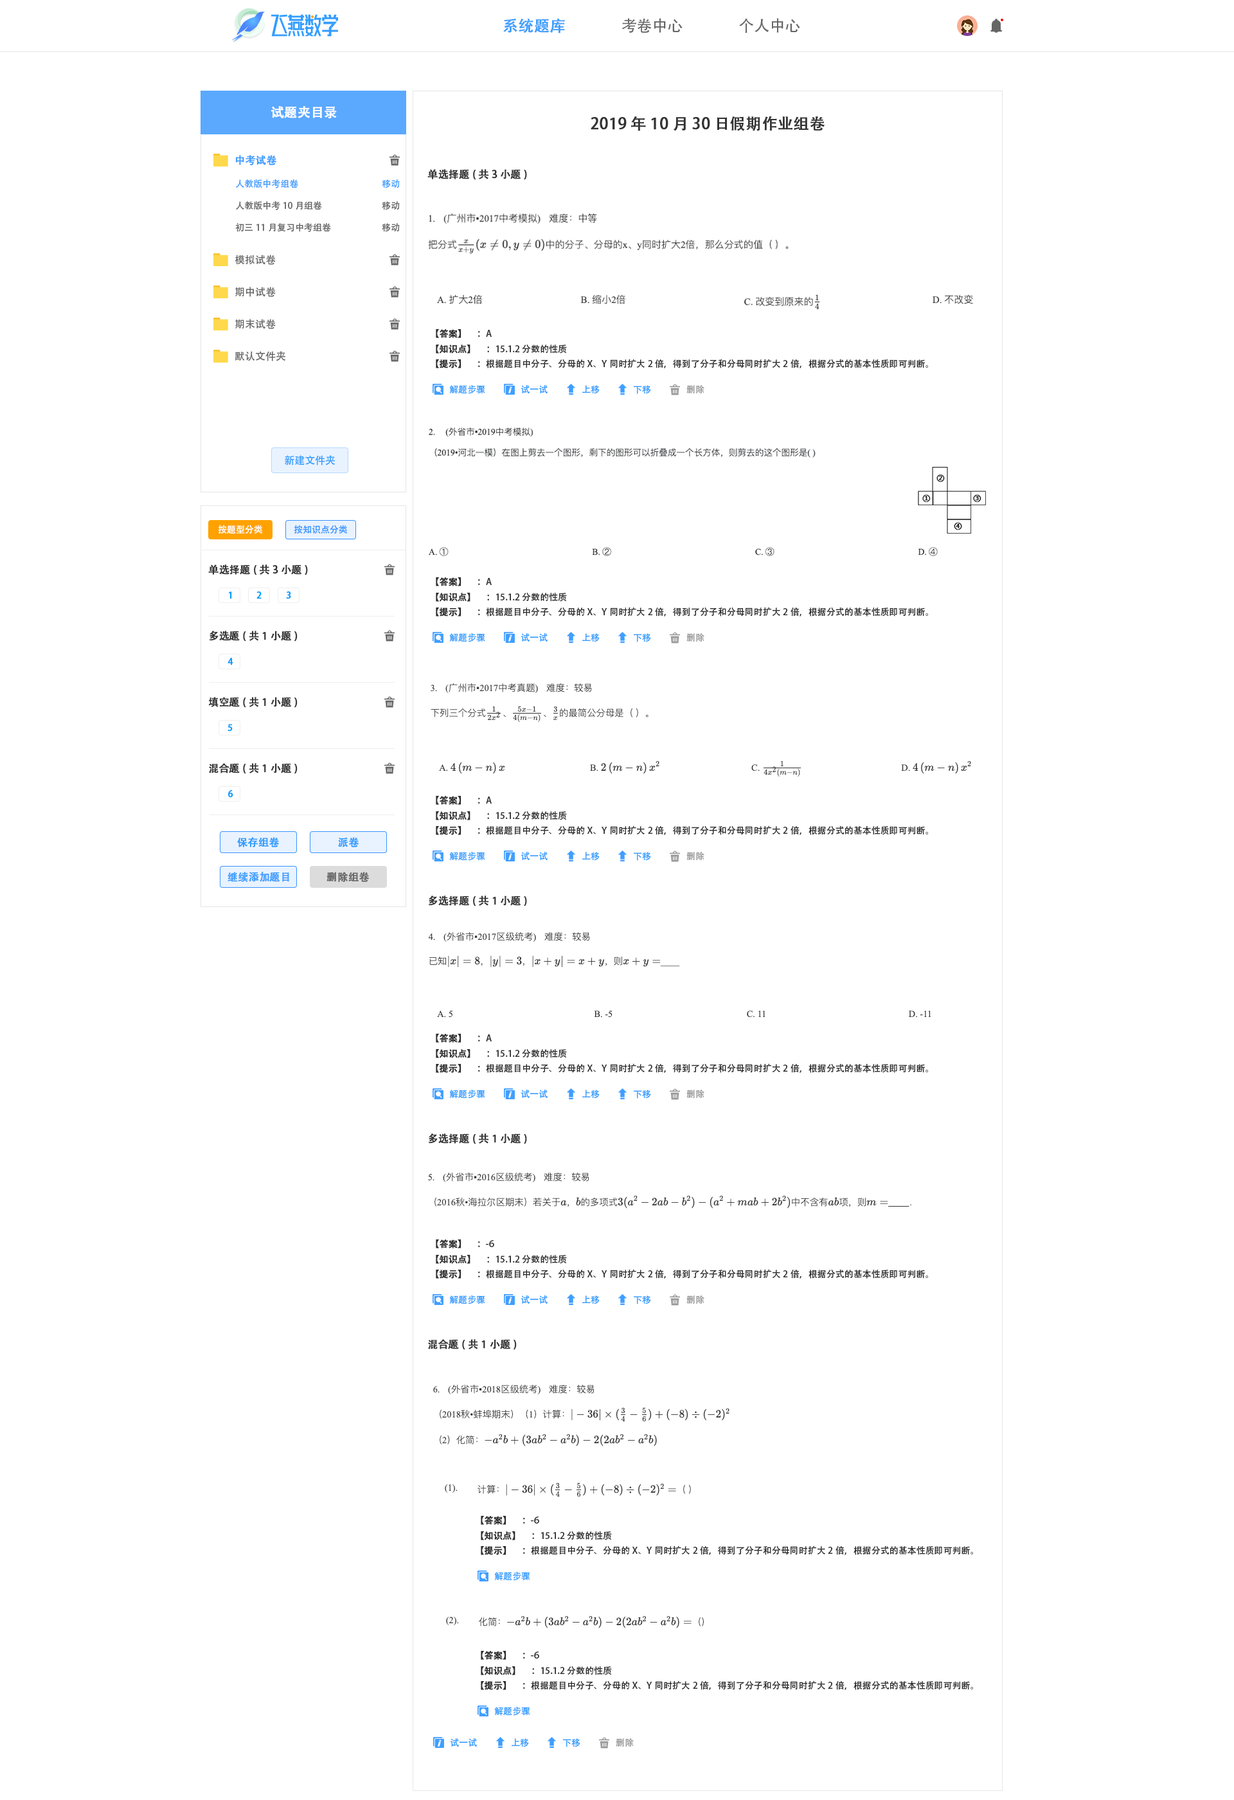
<style>
.page{position:relative;width:1234px;height:1800px;background:#ffffff}
.page>*{position:absolute;margin:0}
.t1{font:15.4px "AdobeHeitiStd-Regular";color:#409eff;font-weight:bold}
.t2{font:15.4px "AdobeHeitiStd-Regular";color:#666666}
.t3{font:12.9px "AdobeHeitiStd-Regular";color:#ffffff;font-weight:bold}
.t4{font:15.4px "AdobeHeitiStd-Regular";color:#333333;font-weight:bold}
.t5{font:10.3px "AdobeHeitiStd-Regular";color:#409eff;font-weight:bold}
.t6{font:10.3px "AdobeHeitiStd-Regular";color:#333333;font-weight:bold}
.t7{font:9px "AdobeHeitiStd-Regular";color:#409eff}
.t8{font:9px "AdobeHeitiStd-Regular";color:#666666}
.t9{font:10.3px "AdobeHeitiStd-Regular";color:#666666}
.t10{font:9px "AdobeHeitiStd-Regular";color:#2e2e2e;font-weight:bold}
.t11{font:9px "AdobeHeitiStd-Regular";color:#2e2e2e}
.t12{font:9px "AdobeHeitiStd-Regular";color:#339dff}
.t13{font:9px "AdobeHeitiStd-Regular";color:#999999}
.t14{font:10.3px "AdobeHeitiStd-Regular";color:#339dff}
.t15{font:9px "AdobeHeitiStd-Regular";color:#ffffff}
.t16{font:9px "AdobeHeitiStd-Regular";color:#3794ff}
.t17{font:9px "AdobeHeitiStd-Regular";color:#049eff;font-weight:bold}
.t18{font:10.3px "AdobeHeitiStd-Regular";color:#339dff;font-weight:bold}
.t19{font:10.3px "AdobeHeitiStd-Regular";color:#666666;font-weight:bold}
</style>
<div class="page">
<p class="t1" style="left:503px;top:19px;width:62px;height:14px">系统题库</p>
<p class="t2" style="left:622px;top:18px;width:61px;height:15px">考卷中心</p>
<p class="t2" style="left:739px;top:18px;width:61px;height:15px">个人中心</p>
<p class="t3" style="left:271px;top:106px;width:66px;height:13px">试题夹目录</p>
<p class="t4" style="left:591px;top:116px;width:234px;height:15px">2019年10月30日假期作业组卷</p>
<p class="t5" style="left:235px;top:155px;width:42px;height:11px">中考试卷</p>
<p class="t6" style="left:428px;top:169px;width:99px;height:11px">单选择题(共3小题)</p>
<p class="t7" style="left:236px;top:179px;width:62px;height:9px">人教版中考组卷</p>
<p class="t7" style="left:382px;top:179px;width:18px;height:9px">移动</p>
<p class="t8" style="left:236px;top:201px;width:86px;height:9px">人教版中考10月组卷</p>
<p class="t8" style="left:382px;top:201px;width:18px;height:9px">移动</p>
<p class="t8" style="left:235px;top:223px;width:96px;height:9px">初三11月复习中考组卷</p>
<p class="t8" style="left:382px;top:223px;width:18px;height:9px">移动</p>
<p class="t9" style="left:235px;top:255px;width:41px;height:10px">模拟试卷</p>
<p class="t9" style="left:235px;top:287px;width:41px;height:10px">期中试卷</p>
<p class="t9" style="left:235px;top:319px;width:41px;height:10px">期末试卷</p>
<p class="t10" style="left:436px;top:329px;width:56px;height:9px">【答案】 <span class="t11">     ：A</span></p>
<p class="t9" style="left:235px;top:351px;width:50px;height:10px">默认文件夹</p>
<p class="t11" style="left:436px;top:345px;width:131px;height:9px"><span class="t10">【知识点】 </span>     ：15.1.2 分数的性质</p>
<p class="t11" style="left:436px;top:359px;width:492px;height:9px"><span class="t10">【提示】 </span>     ：根据题目中分子、分母的X、Y同时扩大2倍，得到了分子和分母同时扩大2倍，根据分式的基本性质即可判断。</p>
<p class="t12" style="left:449px;top:385px;width:36px;height:9px">解题步骤</p>
<p class="t12" style="left:521px;top:385px;width:27px;height:8px">试一试</p>
<p class="t12" style="left:582px;top:385px;width:18px;height:9px">上移</p>
<p class="t12" style="left:634px;top:385px;width:17px;height:9px">下移</p>
<p class="t13" style="left:687px;top:385px;width:18px;height:8px">删除</p>
<p class="t14" style="left:284px;top:455px;width:51px;height:10px">新建文件夹</p>
<p class="t15" style="left:218px;top:525px;width:44px;height:9px">按题型分类</p>
<p class="t16" style="left:294px;top:525px;width:53px;height:9px">按知识点分类</p>
<p class="t6" style="left:208px;top:564px;width:100px;height:11px">单选择题(共3小题)</p>
<p class="t10" style="left:436px;top:577px;width:56px;height:9px">【答案】 <span class="t11">     ：A</span></p>
<p class="t17" style="left:228px;top:591px;width:4px;height:8px">1</p>
<p class="t17" style="left:256px;top:591px;width:6px;height:8px">2</p>
<p class="t17" style="left:286px;top:591px;width:5px;height:8px">3</p>
<p class="t11" style="left:436px;top:593px;width:131px;height:9px"><span class="t10">【知识点】 </span>     ：15.1.2 分数的性质</p>
<p class="t11" style="left:436px;top:607px;width:492px;height:9px"><span class="t10">【提示】 </span>     ：根据题目中分子、分母的X、Y同时扩大2倍，得到了分子和分母同时扩大2倍，根据分式的基本性质即可判断。</p>
<p class="t6" style="left:209px;top:631px;width:89px;height:11px">多选题(共1小题)</p>
<p class="t12" style="left:449px;top:633px;width:36px;height:9px">解题步骤</p>
<p class="t12" style="left:521px;top:633px;width:27px;height:9px">试一试</p>
<p class="t12" style="left:582px;top:633px;width:18px;height:9px">上移</p>
<p class="t12" style="left:634px;top:633px;width:17px;height:9px">下移</p>
<p class="t13" style="left:687px;top:633px;width:18px;height:9px">删除</p>
<p class="t17" style="left:228px;top:658px;width:5px;height:7px">4</p>
<p class="t6" style="left:208px;top:697px;width:90px;height:11px">填空题(共1小题)</p>
<p class="t17" style="left:228px;top:724px;width:5px;height:8px">5</p>
<p class="t6" style="left:209px;top:763px;width:89px;height:11px">混合题(共1小题)</p>
<p class="t17" style="left:228px;top:790px;width:5px;height:8px">6</p>
<p class="t10" style="left:436px;top:796px;width:56px;height:9px">【答案】 <span class="t11">     ：A</span></p>
<p class="t11" style="left:436px;top:811px;width:131px;height:9px"><span class="t10">【知识点】 </span>     ：15.1.2 分数的性质</p>
<p class="t11" style="left:436px;top:825px;width:492px;height:10px"><span class="t10">【提示】 </span>     ：根据题目中分子、分母的X、Y同时扩大2倍，得到了分子和分母同时扩大2倍，根据分式的基本性质即可判断。</p>
<p class="t18" style="left:237px;top:837px;width:43px;height:10px">保存组卷</p>
<p class="t18" style="left:338px;top:837px;width:21px;height:10px">派卷</p>
<p class="t12" style="left:449px;top:852px;width:36px;height:9px">解题步骤</p>
<p class="t12" style="left:521px;top:852px;width:27px;height:8px">试一试</p>
<p class="t12" style="left:582px;top:852px;width:18px;height:9px">上移</p>
<p class="t12" style="left:634px;top:852px;width:17px;height:9px">下移</p>
<p class="t13" style="left:687px;top:852px;width:18px;height:8px">删除</p>
<p class="t5" style="left:228px;top:872px;width:61px;height:10px">继续添加题目</p>
<p class="t19" style="left:327px;top:872px;width:43px;height:10px">删除组卷</p>
<p class="t6" style="left:428px;top:896px;width:99px;height:10px">多选择题(共1小题)</p>
<p class="t10" style="left:436px;top:1034px;width:56px;height:9px">【答案】 <span class="t11">     ：A</span></p>
<p class="t11" style="left:436px;top:1049px;width:131px;height:9px"><span class="t10">【知识点】 </span>     ：15.1.2 分数的性质</p>
<p class="t11" style="left:436px;top:1063px;width:492px;height:10px"><span class="t10">【提示】 </span>     ：根据题目中分子、分母的X、Y同时扩大2倍，得到了分子和分母同时扩大2倍，根据分式的基本性质即可判断。</p>
<p class="t12" style="left:449px;top:1090px;width:36px;height:9px">解题步骤</p>
<p class="t12" style="left:521px;top:1090px;width:27px;height:8px">试一试</p>
<p class="t12" style="left:582px;top:1090px;width:18px;height:9px">上移</p>
<p class="t12" style="left:634px;top:1090px;width:17px;height:9px">下移</p>
<p class="t13" style="left:687px;top:1090px;width:18px;height:8px">删除</p>
<p class="t6" style="left:428px;top:1133px;width:99px;height:11px">多选择题(共1小题)</p>
<p class="t10" style="left:436px;top:1239px;width:58px;height:9px">【答案】 <span class="t11">     ：-6</span></p>
<p class="t11" style="left:436px;top:1255px;width:131px;height:9px"><span class="t10">【知识点】 </span>     ：15.1.2 分数的性质</p>
<p class="t11" style="left:436px;top:1269px;width:492px;height:10px"><span class="t10">【提示】 </span>     ：根据题目中分子、分母的X、Y同时扩大2倍，得到了分子和分母同时扩大2倍，根据分式的基本性质即可判断。</p>
<p class="t12" style="left:449px;top:1295px;width:36px;height:9px">解题步骤</p>
<p class="t12" style="left:521px;top:1295px;width:27px;height:9px">试一试</p>
<p class="t12" style="left:582px;top:1295px;width:18px;height:9px">上移</p>
<p class="t12" style="left:634px;top:1295px;width:17px;height:9px">下移</p>
<p class="t13" style="left:687px;top:1295px;width:18px;height:9px">删除</p>
<p class="t6" style="left:428px;top:1339px;width:89px;height:11px">混合题(共1小题)</p>
<p class="t10" style="left:481px;top:1516px;width:58px;height:9px">【答案】 <span class="t11">     ：-6</span></p>
<p class="t11" style="left:481px;top:1531px;width:131px;height:9px"><span class="t10">【知识点】 </span>     ：15.1.2 分数的性质</p>
<p class="t11" style="left:481px;top:1545px;width:492px;height:10px"><span class="t10">【提示】 </span>     ：根据题目中分子、分母的X、Y同时扩大2倍，得到了分子和分母同时扩大2倍，根据分式的基本性质即可判断。</p>
<p class="t12" style="left:494px;top:1572px;width:36px;height:9px">解题步骤</p>
<p class="t10" style="left:481px;top:1651px;width:58px;height:9px">【答案】 <span class="t11">     ：-6</span></p>
<p class="t11" style="left:481px;top:1666px;width:131px;height:9px"><span class="t10">【知识点】 </span>     ：15.1.2 分数的性质</p>
<p class="t11" style="left:481px;top:1680px;width:492px;height:10px"><span class="t10">【提示】 </span>     ：根据题目中分子、分母的X、Y同时扩大2倍，得到了分子和分母同时扩大2倍，根据分式的基本性质即可判断。</p>
<p class="t12" style="left:494px;top:1707px;width:36px;height:9px">解题步骤</p>
<p class="t12" style="left:451px;top:1738px;width:26px;height:9px">试一试</p>
<p class="t12" style="left:512px;top:1738px;width:17px;height:9px">上移</p>
<p class="t12" style="left:563px;top:1738px;width:17px;height:9px">下移</p>
<p class="t13" style="left:616px;top:1738px;width:18px;height:9px">删除</p>
</div>
